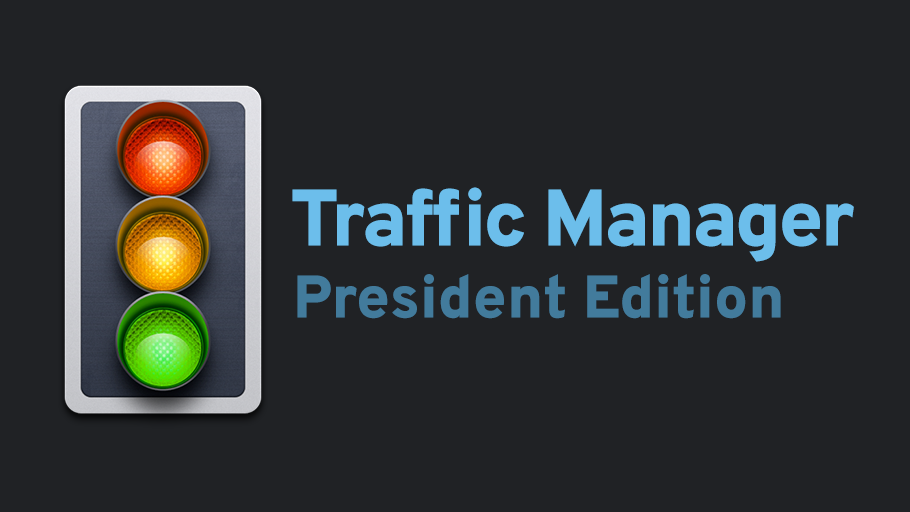
<style>
.page{position:relative;width:910px;height:512px;background:#202225}
.page>*{position:absolute;margin:0}
.t1{font:60px "Overpass-Heavy";color:#427b9c}
.t2{font:80px "Overpass-Heavy";color:#6cbeeb}
.t3{font:80px "Overpass-Heavy";letter-spacing:-0.04em;color:#6cbeeb}
</style>
<div class="page">
<p class="t1" style="left:292px;top:187px;width:562px;height:132px"><span class="t2">T</span><span class="t3">raffic Manager<br></span>President Edition</p>
</div>
